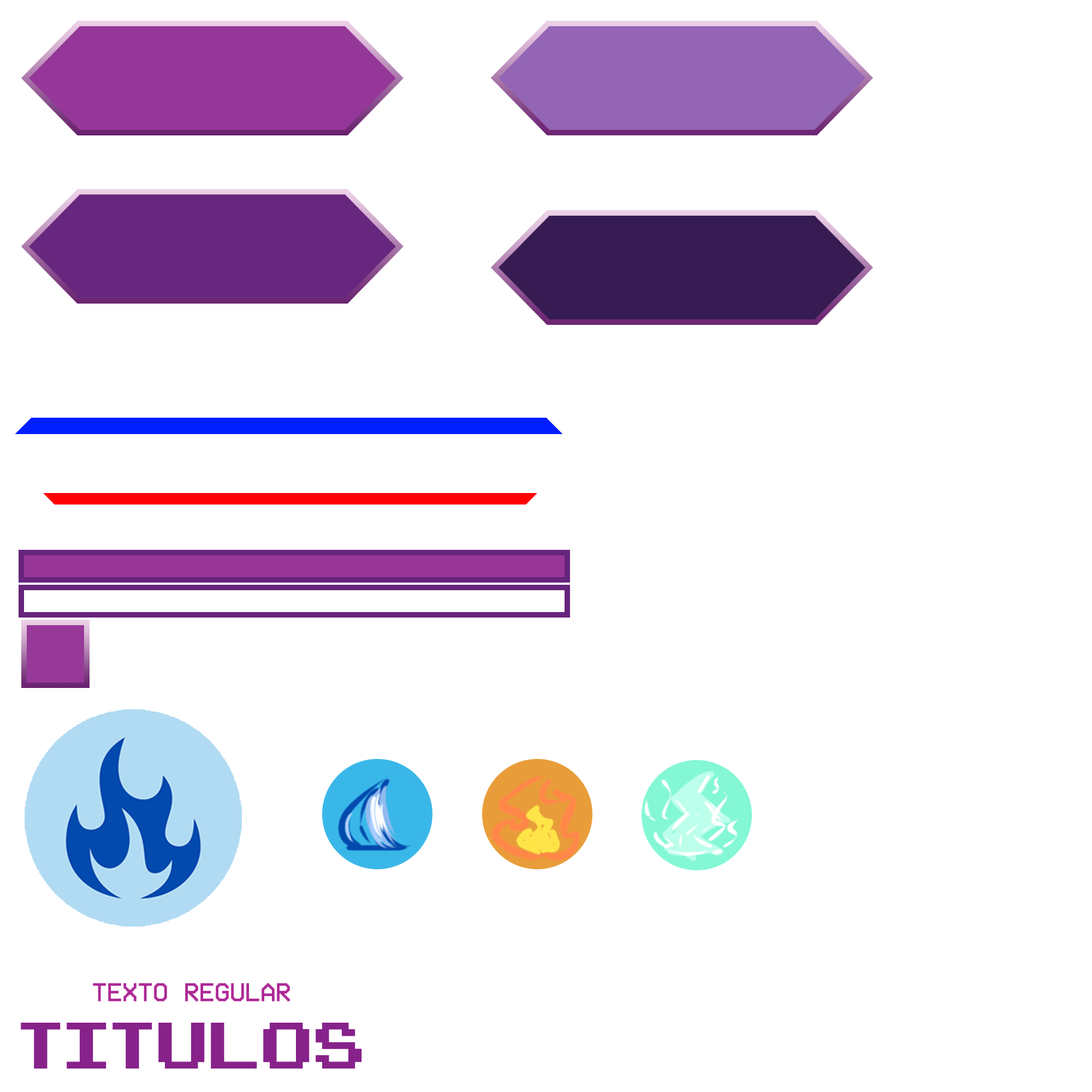
<style>
.page{position:relative;width:1092px;height:1092px;background:#ffffff}
.page>*{position:absolute;margin:0}
.t1{font:26.2px "VCROSDMono";color:#ad2895;text-transform:uppercase}
.t2{font:65.5px "Arcadepix";color:#87228a;text-transform:uppercase}
</style>
<div class="page">
<p class="t1" style="left:93px;top:983px;width:197px;height:18px">texto regular</p>
<p class="t2" style="left:21px;top:1023px;width:341px;height:46px">Titulos</p>
</div>
